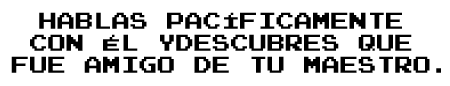
<style>
.page{position:relative;width:450px;height:86px;background:#ffffff}
.page>*{position:absolute;margin:0}
.t1{font:18.2px "PressStart2P";color:#000000}
</style>
<div class="page">
<p class="t1" style="left:11px;top:12px;width:430px;height:61px;text-align:center">HABLAS PACÍFICAMENTE <br>CON ÉL YDESCUBRES QUE <br>FUE AMIGO DE TU MAESTRO.</p>
</div>
